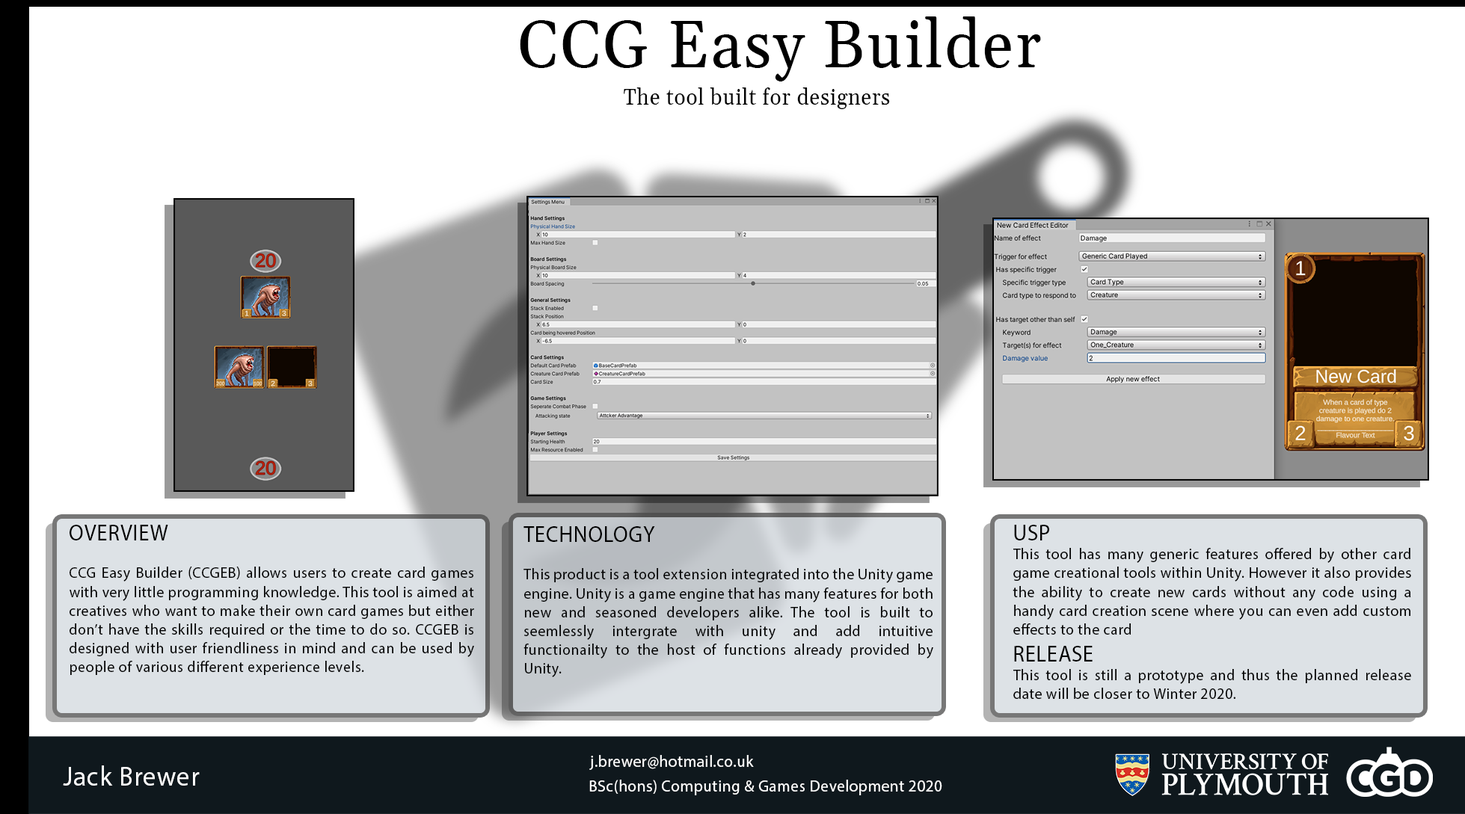
<style>
.page{position:relative;width:1465px;height:814px;background:#ffffff}
.page>*{position:absolute;margin:0}
.t1{font:66.3px "Gelasio-Regular";letter-spacing:0.03em;color:#000000;scale:0.95 1}
.t2{font:22.1px "Gelasio-Regular";letter-spacing:0.03em;color:#000000;scale:0.95 1}
.t3{font:15.7px "MyriadPro-Regular";letter-spacing:0.03em;color:#000000;scale:0.95 1}
.t4{font:22.4px "MyriadPro-Regular";letter-spacing:0.03em;color:#000000;scale:0.95 1}
.t5{font:16.6px "MyriadPro-Regular";letter-spacing:0.03em;color:#ffffff;scale:0.95 1}
.t6{font:27.6px "MyriadPro-Regular";letter-spacing:0.03em;color:#ffffff;scale:0.95 1}
</style>
<div class="page">
<p class="t1" style="left:520px;top:16px;width:521px;height:65px">CCG Easy Builder</p>
<p class="t2" style="left:624px;top:87px;width:266px;height:22px">The tool built for designers</p>
<p class="t3" style="left:70px;top:525px;width:404px;height:150px;text-align:justify"><span class="t4">OVERVIEW<br></span><br>CCG Easy Builder (CCGEB) allows users to create card games with very little programming knowledge. This tool is aimed at creatives who want to make their own card games but either don’t have the skills required or the time to do so. CCGEB is designed with user friendliness in mind and can be used by people of various different experience levels.</p>
<p class="t3" style="left:523px;top:526px;width:410px;height:151px;text-align:justify"><span class="t4">TECHNOLOGY<br></span><br>This product is a tool extension integrated into the Unity game engine. Unity is a game engine that has many features for both new and seasoned developers alike. The tool is built to seemlessly intergrate with unity and add intuitive functionailty to the host of functions already provided by Unity.</p>
<p class="t3" style="left:1012px;top:525px;width:399px;height:174px;text-align:justify"><span class="t4">USP</span><br>This tool has many generic features offered by other card game creational tools within Unity. However it also provides the ability to create new cards without any code using a handy card creation scene where you can even add custom effects to the card<br><span class="t4">RELEASE</span><br>This tool is still a prototype and thus the planned release date will be closer to Winter 2020.</p>
<p class="t5" style="left:589px;top:755px;width:165px;height:15px">j.brewer@hotmail.co.uk</p>
<p class="t6" style="left:63px;top:766px;width:137px;height:20px">Jack Brewer</p>
<p class="t5" style="left:589px;top:780px;width:353px;height:15px">BSc(hons) Computing &amp; Games Development 2020</p>
</div>
